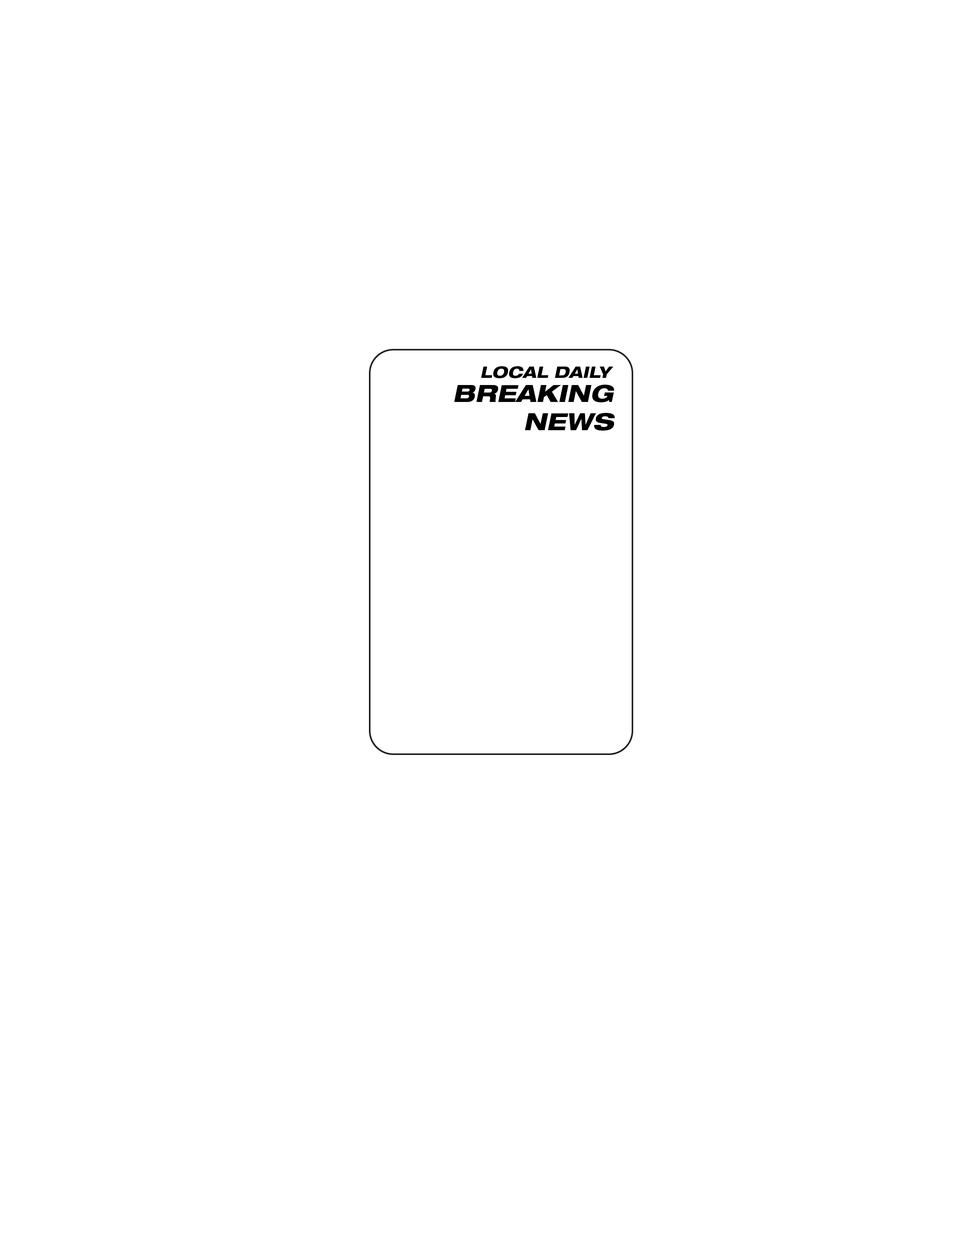
<style>
.page{position:relative;width:960px;height:1242px;background:#ffffff}
.page>*{position:absolute;margin:0}
.t1{font:15.7px "HelveticaNeueLTPro-HvExO";color:#000000}
.t2{font:23.5px "HelveticaNeueLTPro-HvExO";color:#000000}
</style>
<div class="page">
<p class="t1" style="left:481px;top:366px;width:133px;height:12px">LOCAL DAILY</p>
<p class="t2" style="left:454px;top:385px;width:161px;height:46px;text-align:right">BREAKING<br>NEWS</p>
</div>
